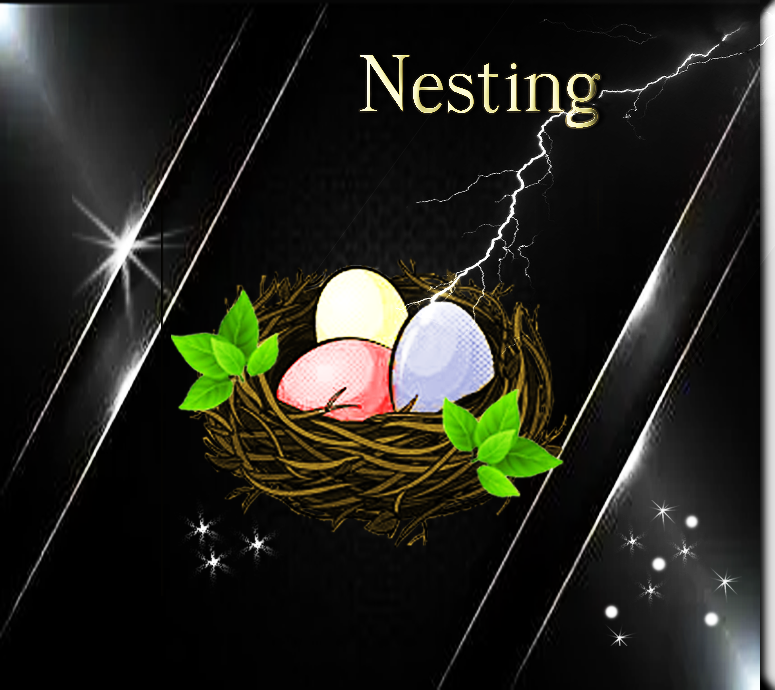
<style>
.page{position:relative;width:775px;height:690px}
.page>*{position:absolute;margin:0}
.t1{font:81.3px "SuperFrench"}
</style>
<div class="page">
<p class="t1" style="left:360px;top:55px;width:240px;height:73px">Nesting</p>
<p class="t1" style="left:360px;top:55px;width:240px;height:73px">Nesting</p>
</div>
